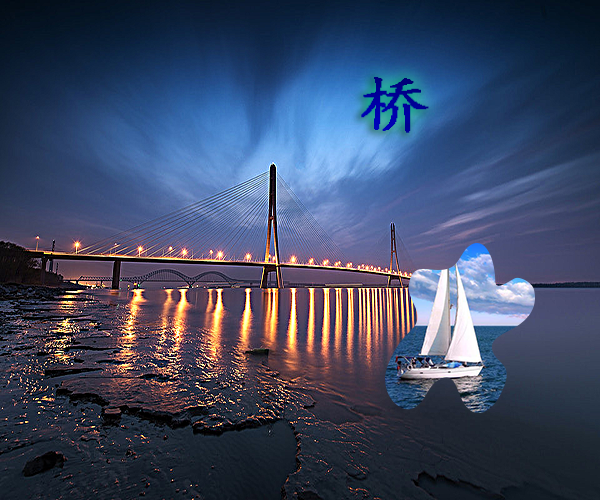
<style>
.page{position:relative;width:600px;height:500px}
.page>*{position:absolute;margin:0}
.t1{font:62.6px "¿¬Ìå";font-weight:bold;scale:1.09 1}
</style>
<div class="page">
<p class="t1" style="left:361px;top:77px;width:68px;height:56px">桥</p>
</div>
